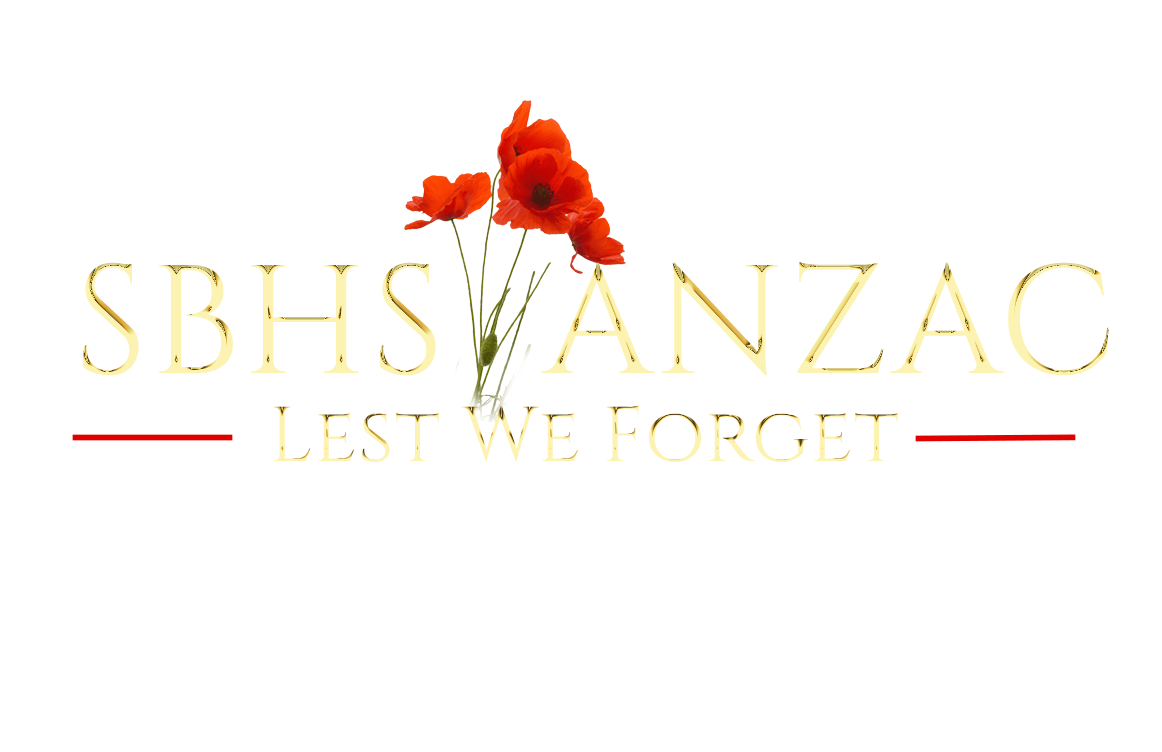
<style>
.page{position:relative;width:1162px;height:752px;background:#ffffff}
.page>*{position:absolute;margin:0}
.t1{font:154.2px "Cinzel-Regular";letter-spacing:0.02em;color:#fcf2b1}
.t2{font:77.4px "Cinzel-Regular";letter-spacing:0.02em}
</style>
<div class="page">
<p class="t1" style="left:82px;top:262px;width:354px;height:114px">SBHS</p>
<p class="t1" style="left:541px;top:262px;width:568px;height:114px">ANZAC</p>
<p class="t2" style="left:273px;top:405px;width:625px;height:57px">Lest We Forget</p>
</div>
